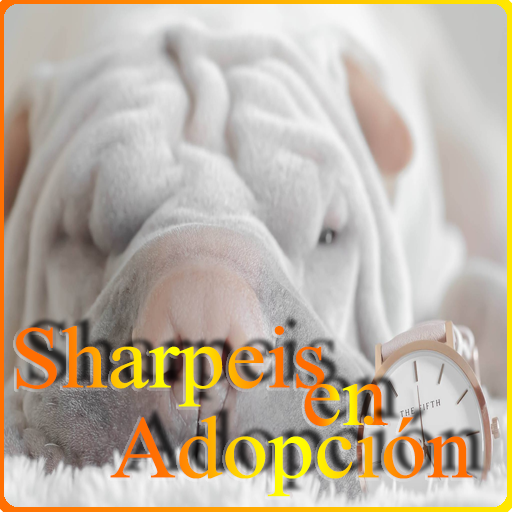
<style>
.page{position:relative;width:512px;height:512px}
.page>*{position:absolute;margin:0}
.t1{font:106.9px "ShonarBangla";scale:1.04 1}
</style>
<div class="page">
<p class="t1" style="left:16px;top:326px;width:309px;height:81px">Sharpeis</p>
<p class="t1" style="left:304px;top:384px;width:84px;height:43px">en</p>
<p class="t1" style="left:110px;top:415px;width:363px;height:82px">Adopción</p>
</div>
